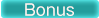
<style>
.page{position:relative;width:99px;height:18px;background:#239d9c}
.page>*{position:absolute;margin:0}
.t1{font:16px "GothicMB101Pro-Regular";color:#fff5f0}
</style>
<div class="page">
<p class="t1" style="left:25px;top:3px;width:49px;height:13px">Bonus</p>
</div>
